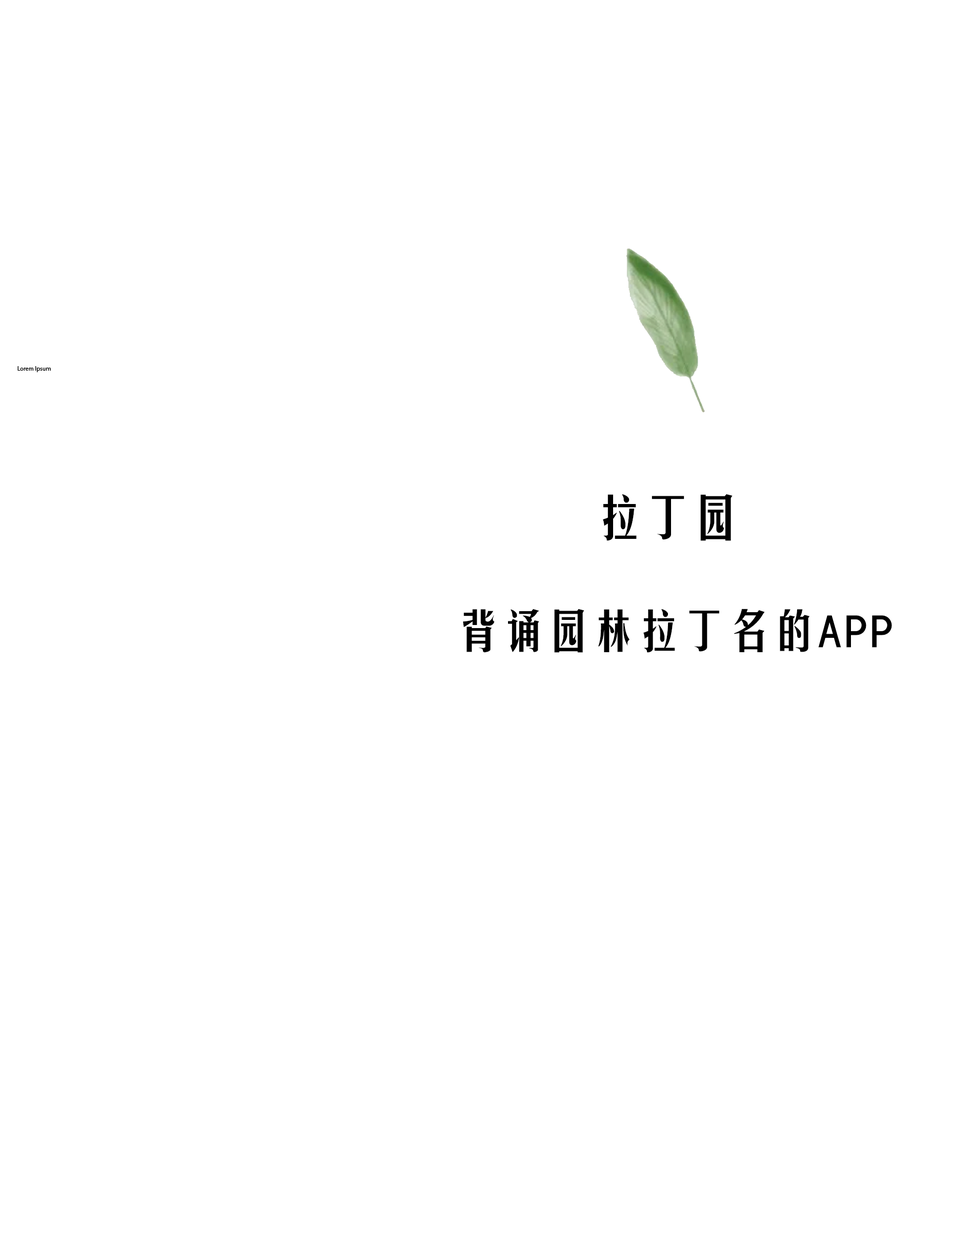
<style>
.page{position:relative;width:954px;height:1249px;background:#ffffff}
.page>*{position:absolute;margin:0}
.t1{font:6.2px "MyriadPro-Regular";color:#000000}
.t2{font:48.2px "Reeji-CloudMeiHei-GB-Regular";color:#000000}
.t3{font:45.1px "Reeji-CloudMeiHei-GB-Regular";color:#000000}
</style>
<div class="page">
<p class="t1" style="left:17px;top:366px;width:34px;height:6px">Lorem Ipsum</p>
<p class="t2" style="left:603px;top:494px;width:130px;height:47px">拉丁园</p>
<p class="t3" style="left:463px;top:609px;width:429px;height:44px">背诵园林拉丁名的APP</p>
</div>
